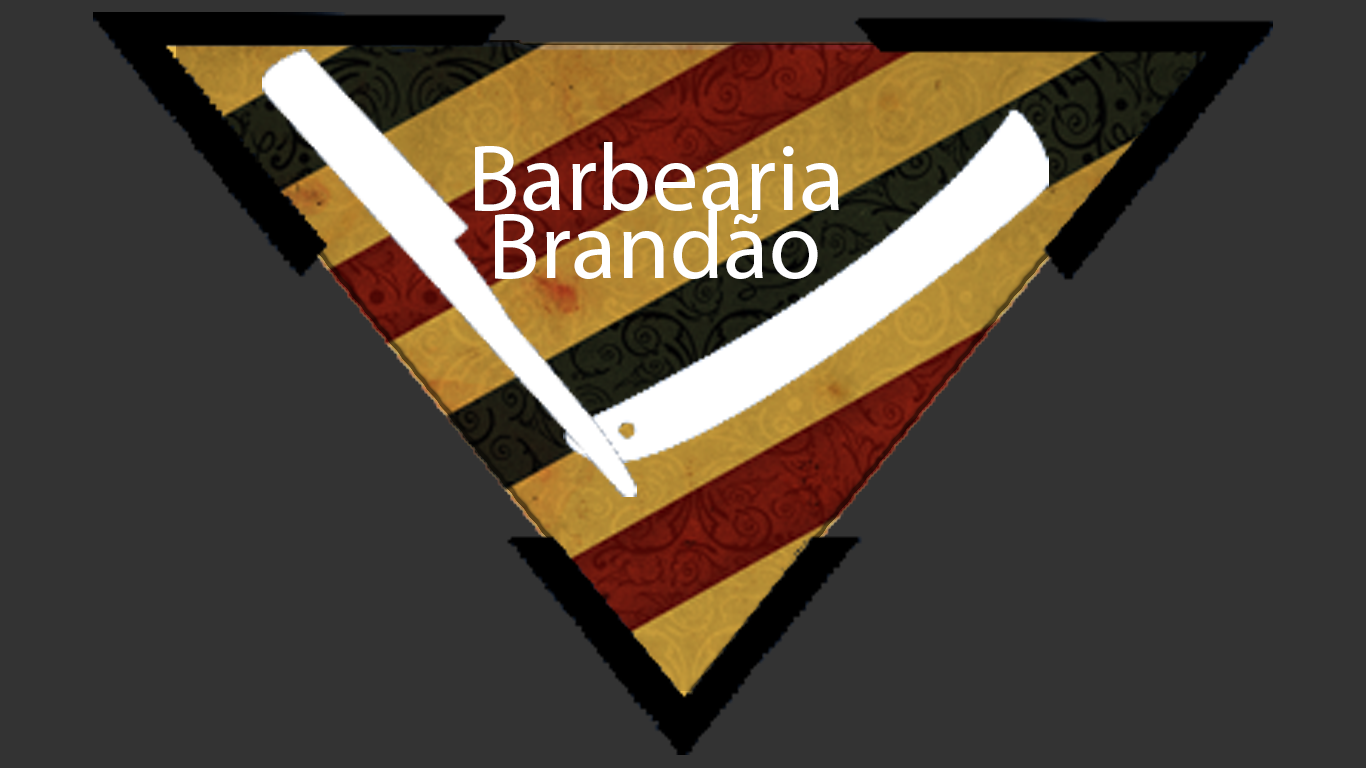
<style>
.page{position:relative;width:1366px;height:768px;background:#333333}
.page>*{position:absolute;margin:0}
.t1{font:95.2px "MyriadPro-Regular";color:#ffffff}
</style>
<div class="page">
<p class="t1" style="left:475px;top:142px;width:364px;height:69px">Barbearia</p>
<p class="t1" style="left:495px;top:210px;width:323px;height:69px">Brandão</p>
</div>
